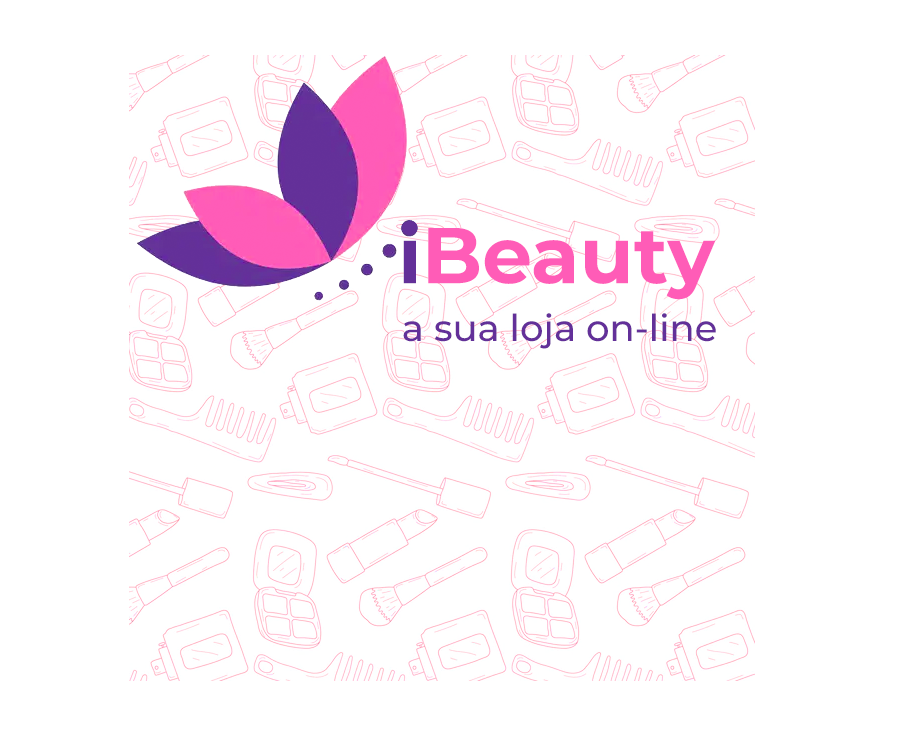
<style>
.page{position:relative;width:900px;height:736px;background:#ffffff}
.page>*{position:absolute;margin:0}
.t1{font:79px "Montserrat-Bold";color:#ff5cb7}
.t2{font:79px "Montserrat-Bold";color:#633099}
.t3{font:37px "Montserrat-Medium";color:#633099}
</style>
<div class="page">
<p class="t1" style="left:402px;top:221px;width:314px;height:79px"><span class="t2">i</span>Beauty</p>
<p class="t3" style="left:403px;top:313px;width:313px;height:36px">a sua loja on-line</p>
</div>
